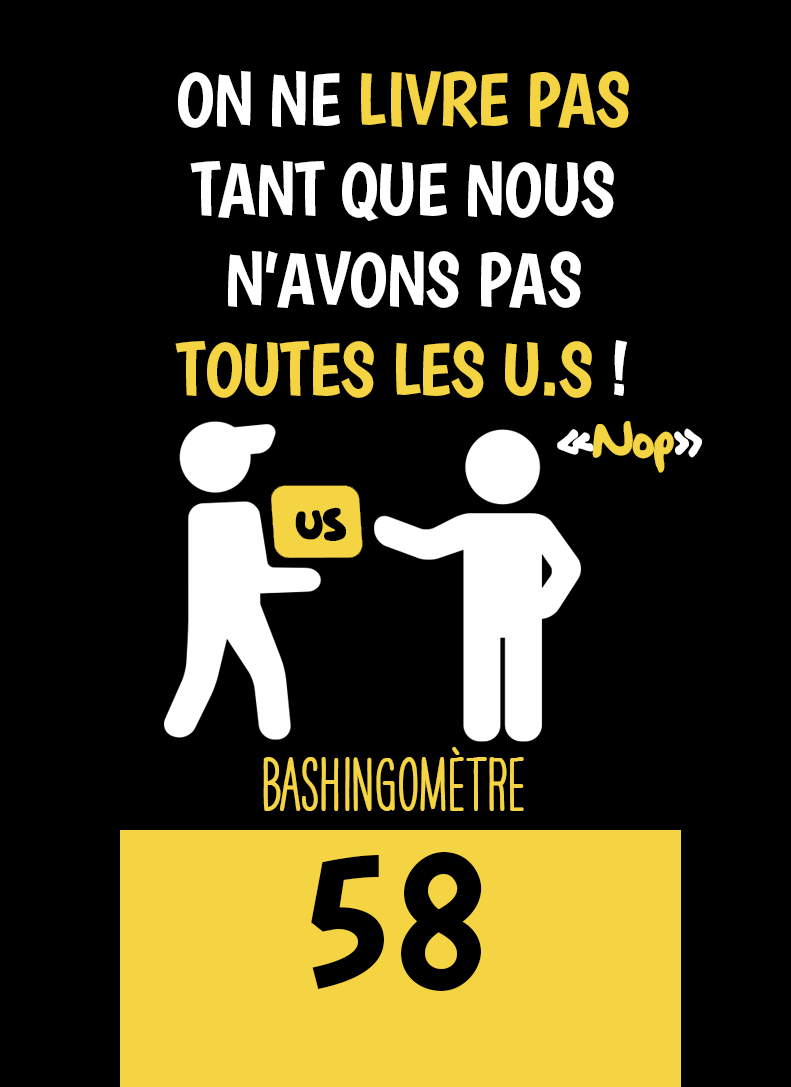
<style>
.page{position:relative;width:791px;height:1087px;background:#000000}
.page>*{position:absolute;margin:0}
.t1{font:75px "Boogaloo-Regular";letter-spacing:-0.02em;color:#ffffff}
.t2{font:75px "Boogaloo-Regular";letter-spacing:-0.02em;color:#f4d443}
.t3{font:58.3px "OakStreetW01-Regular";letter-spacing:-0.02em;color:#f4d443}
.t4{font:58.3px "OakStreetW01-Regular";letter-spacing:-0.02em;color:#ffffff}
.t5{font:75px "OakStreetW01-Regular";letter-spacing:-0.02em;color:#010000}
.t6{font:66.7px "HAVEANICEDAYTallW04-Bold";color:#f4d443}
.t7{font:200px "Boogaloo-Regular";color:#000000}
</style>
<div class="page">
<p class="t1" style="left:175px;top:71px;width:454px;height:327px;text-align:center">ON NE <span class="t2">LIVRE PAS</span> TANT QUE NOUS N’AVONS PAS <span class="t2">TOUTES LES U.S </span>!</p>
<p class="t3" style="left:557px;top:421px;width:145px;height:52px"><span class="t4">«</span>Nop<span class="t4">»</span></p>
<p class="t5" style="left:295px;top:507px;width:51px;height:34px">us</p>
<p class="t6" style="left:263px;top:747px;width:261px;height:64px">BASHINgomètre</p>
<p class="t7" style="left:311px;top:852px;width:171px;height:139px">58</p>
</div>
